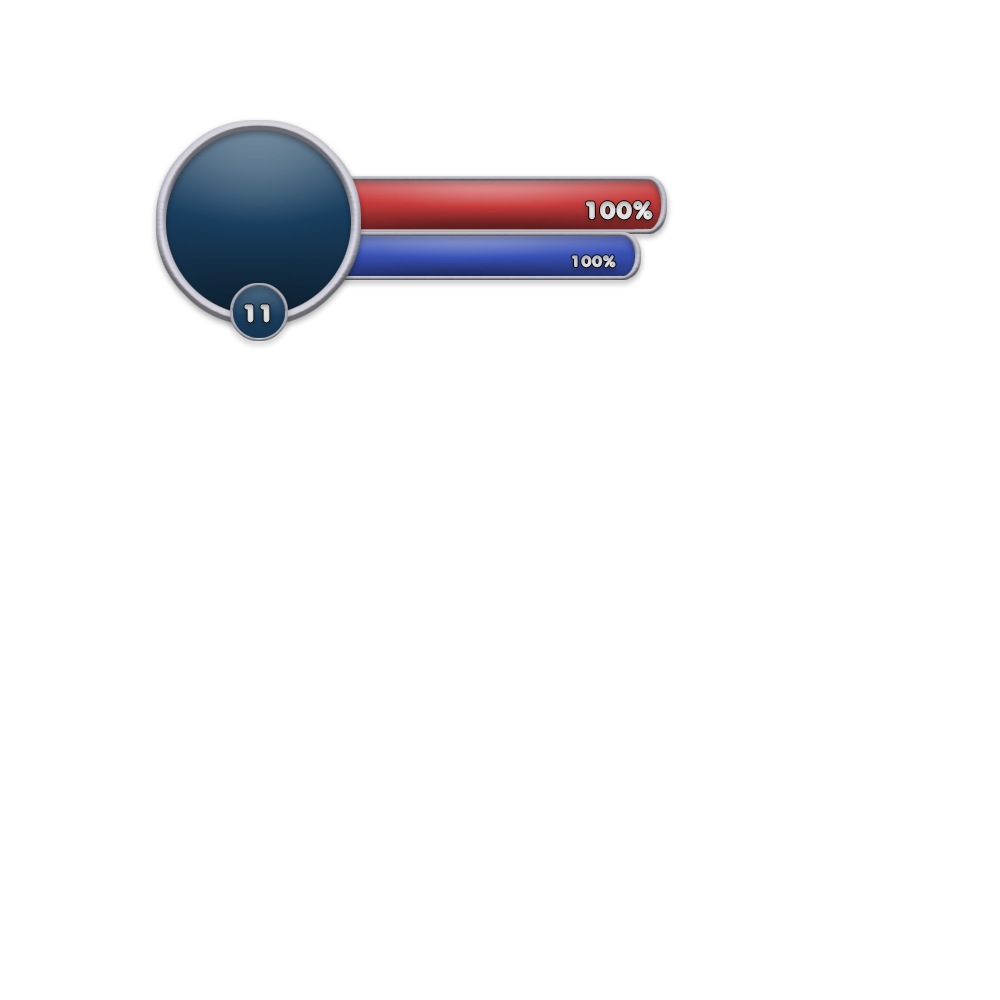
<style>
.page{position:relative;width:1000px;height:1000px;background:#ffffff}
.page>*{position:absolute;margin:0}
.t1{font:24.2px "Anja-Eliane-Nornal";color:#dbdbdb}
.t2{font:15.8px "Anja-Eliane-Nornal";color:#cecece}
.t3{font:24.2px "Anja-Eliane-Nornal";color:#d8d8d8}
</style>
<div class="page">
<p class="t1" style="left:586px;top:201px;width:67px;height:19px">100%</p>
<p class="t2" style="left:571px;top:255px;width:45px;height:13px">100%</p>
<p class="t3" style="left:244px;top:304px;width:26px;height:19px">11</p>
</div>
